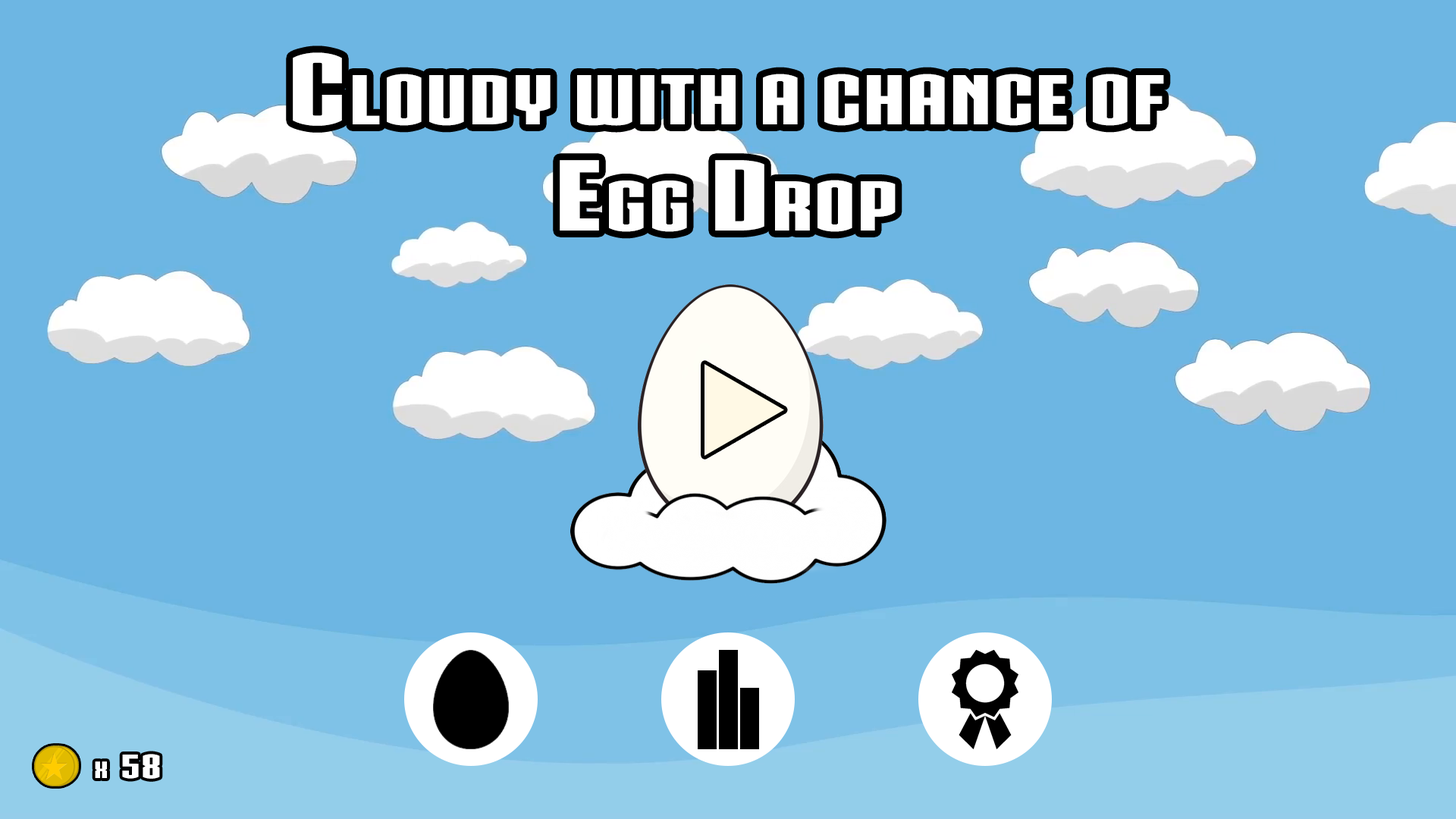
<style>
.page{position:relative;width:1456px;height:819px;background:#6db6e3}
.page>*{position:absolute;margin:0}
.t1{font:96.7px/106.2px "IRONMANOFWAR002NCV";letter-spacing:0.01em;color:#ffffff;font-variant:small-caps;scale:1.41 1}
.t2{font:32.2px "IRONMANOFWAR002NCV";letter-spacing:0.01em;color:#ffffff;font-variant:small-caps;scale:1.41 1}
</style>
<div class="page">
<p class="t1" style="left:293px;top:52px;width:871px;height:180px;text-align:center">Cloudy with a chance of<br>Egg Drop</p>
<p class="t2" style="left:95px;top:754px;width:65px;height:25px">x  58</p>
</div>
